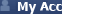
<style>
.page{position:relative;width:93px;height:14px;background:#ffffff}
.page>*{position:absolute;margin:0}
.t1{font:13px "Tahoma-Bold";color:#ffffff}
</style>
<div class="page">
<p class="t1" style="left:18px;top:2px;width:75px;height:12px">My Account</p>
</div>
